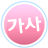
<style>
.page{position:relative;width:48px;height:48px;background:#ffffff}
.page>*{position:absolute;margin:0}
.t1{font:19px "SUPMoebiusB";color:#ffffff}
</style>
<div class="page">
<p class="t1" style="left:7px;top:16px;width:35px;height:18px;rotate:-6deg">가사</p>
</div>
